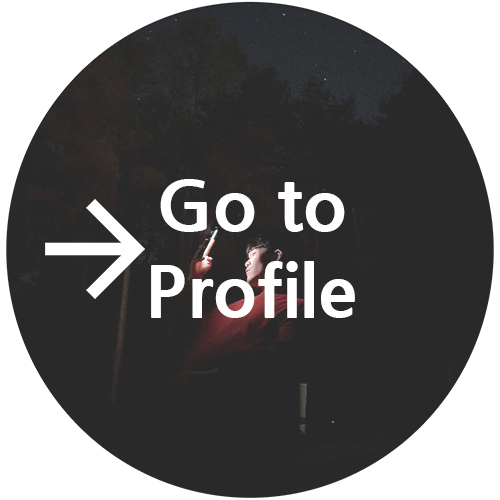
<style>
.page{position:relative;width:500px;height:500px;background:#292929}
.page>*{position:absolute;margin:0}
.t1{font:72px "NanumGothicExtraBold";color:#ffffff}
</style>
<div class="page">
<p class="t1" style="left:151px;top:179px;width:204px;height:139px;text-align:center">Go to<br>Profile</p>
</div>
